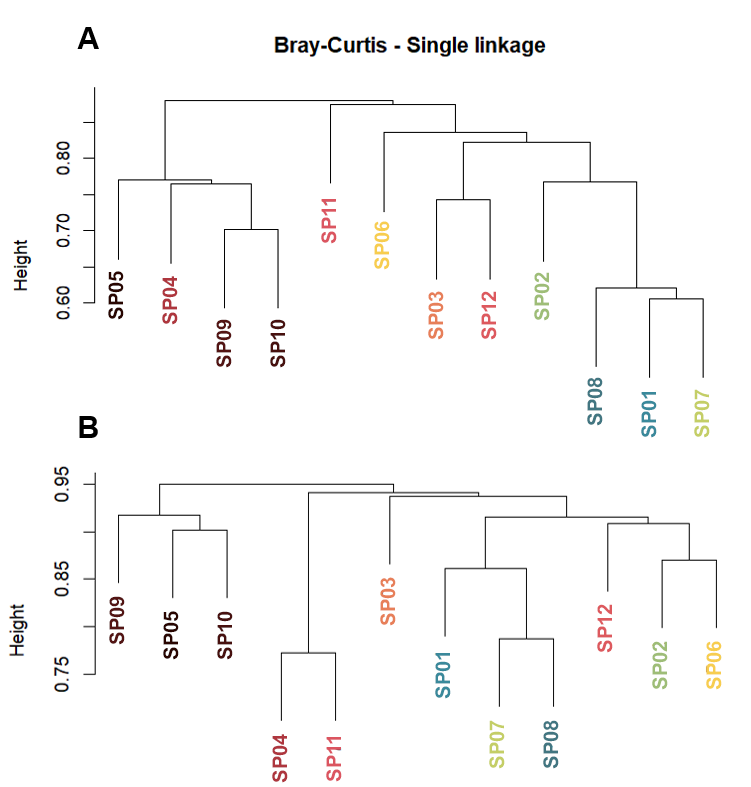
<style>
.page{position:relative;width:751px;height:787px;background:#ffffff}
.page>*{position:absolute;margin:0}
.t1{font:20.3px "Arial-BoldMT";color:#db5560}
.t2{font:20.3px "Arial-BoldMT";color:#f7cd4f}
.t3{font:20.3px "Arial-BoldMT";color:#290500}
.t4{font:20.3px "Arial-BoldMT";color:#ae363e}
.t5{font:20.3px "Arial-BoldMT";color:#9ebd77}
.t6{font:20.3px "Arial-BoldMT";color:#e77f59}
.t7{font:20.3px "Arial-BoldMT";color:#dd595e}
.t8{font:20.3px "Arial-BoldMT";color:#531413}
.t9{font:20.3px "Arial-BoldMT";color:#47100e}
.t10{font:20.3px "Arial-BoldMT";color:#427681}
.t11{font:20.3px "Arial-BoldMT";color:#c4ce66}
.t12{font:20.3px "Arial-BoldMT";color:#3a899b}
</style>
<div class="page">
<p class="t1" style="left:321px;top:199px;width:16px;height:45px;rotate:-90deg">SP11</p>
<p class="t2" style="left:374px;top:221px;width:16px;height:49px;rotate:-90deg">SP06</p>
<p class="t3" style="left:108px;top:271px;width:16px;height:49px;rotate:-90deg">SP05</p>
<p class="t4" style="left:162px;top:276px;width:16px;height:49px;rotate:-90deg">SP04</p>
<p class="t5" style="left:534px;top:272px;width:16px;height:49px;rotate:-90deg">SP02</p>
<p class="t6" style="left:428px;top:291px;width:16px;height:49px;rotate:-90deg">SP03</p>
<p class="t7" style="left:481px;top:291px;width:16px;height:49px;rotate:-90deg">SP12</p>
<p class="t8" style="left:216px;top:319px;width:16px;height:49px;rotate:-90deg">SP09</p>
<p class="t9" style="left:270px;top:319px;width:16px;height:49px;rotate:-90deg">SP10</p>
<p class="t10" style="left:587px;top:377px;width:16px;height:49px;rotate:-90deg">SP08</p>
<p class="t11" style="left:694px;top:389px;width:16px;height:49px;rotate:-90deg">SP07</p>
<p class="t12" style="left:641px;top:392px;width:16px;height:46px;rotate:-90deg">SP01</p>
<p class="t6" style="left:380px;top:577px;width:16px;height:49px;rotate:-90deg">SP03</p>
<p class="t8" style="left:109px;top:596px;width:16px;height:49px;rotate:-90deg">SP09</p>
<p class="t7" style="left:597px;top:604px;width:16px;height:49px;rotate:-90deg">SP12</p>
<p class="t3" style="left:163px;top:611px;width:16px;height:49px;rotate:-90deg">SP05</p>
<p class="t9" style="left:217px;top:611px;width:16px;height:49px;rotate:-90deg">SP10</p>
<p class="t5" style="left:652px;top:641px;width:16px;height:49px;rotate:-90deg">SP02</p>
<p class="t2" style="left:706px;top:641px;width:16px;height:49px;rotate:-90deg">SP06</p>
<p class="t12" style="left:435px;top:653px;width:16px;height:46px;rotate:-90deg">SP01</p>
<p class="t11" style="left:489px;top:720px;width:16px;height:49px;rotate:-90deg">SP07</p>
<p class="t10" style="left:543px;top:720px;width:16px;height:49px;rotate:-90deg">SP08</p>
<p class="t4" style="left:272px;top:734px;width:16px;height:49px;rotate:-90deg">SP04</p>
<p class="t1" style="left:326px;top:737px;width:16px;height:45px;rotate:-90deg">SP11</p>
</div>
